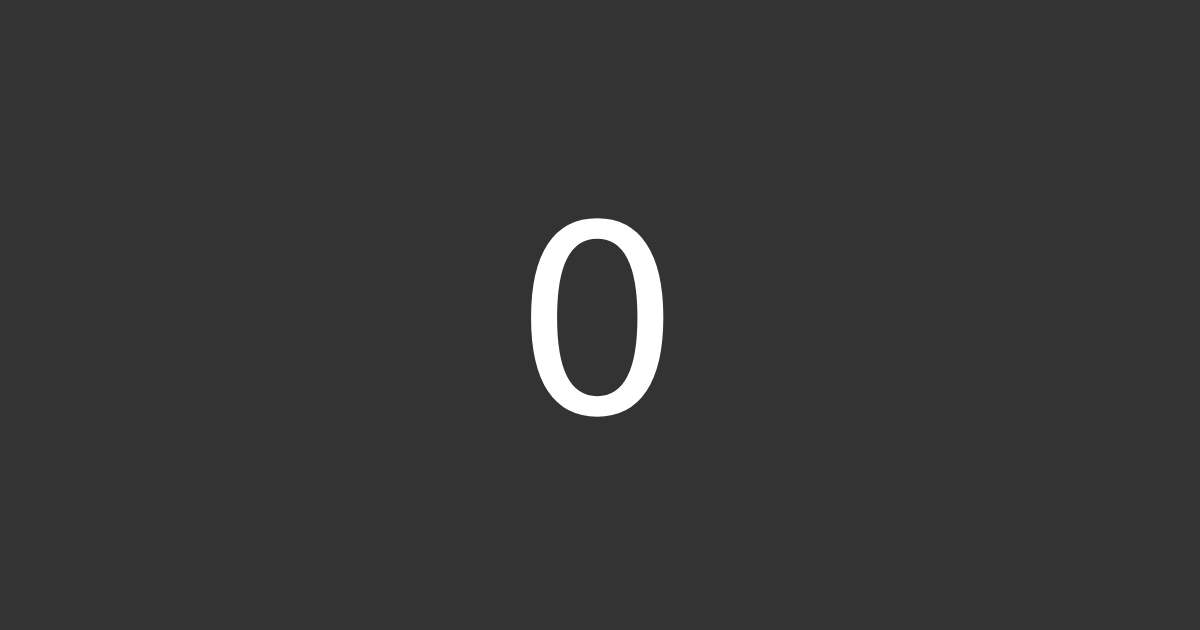
<style>
.page{position:relative;width:1200px;height:630px;background:#333333}
.page>*{position:absolute;margin:0}
.t1{font:262.5px "DejaVuSans";color:#ffffff}
</style>
<div class="page">
<p class="t1" style="left:531px;top:218px;width:133px;height:199px">0</p>
</div>
